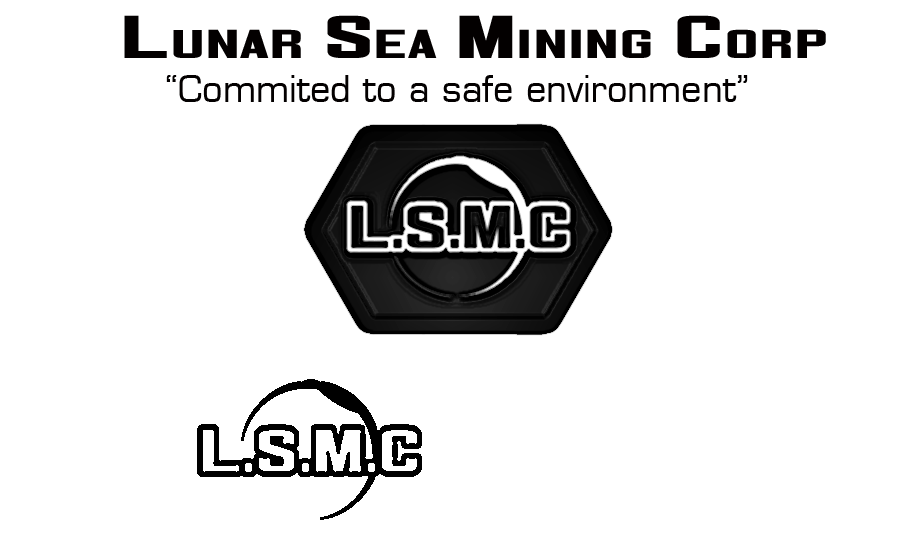
<style>
.page{position:relative;width:900px;height:550px;background:#ffffff}
.page>*{position:absolute;margin:0}
.t1{font:72px "CorporateHQ";color:#030000}
.t2{font:36px "Eurostile";color:#030000}
</style>
<div class="page">
<p class="t1" style="left:124px;top:15px;width:702px;height:43px">Lunar Sea Mining Corp</p>
<p class="t2" style="left:166px;top:75px;width:582px;height:27px">“Commited to a safe environment”</p>
</div>
